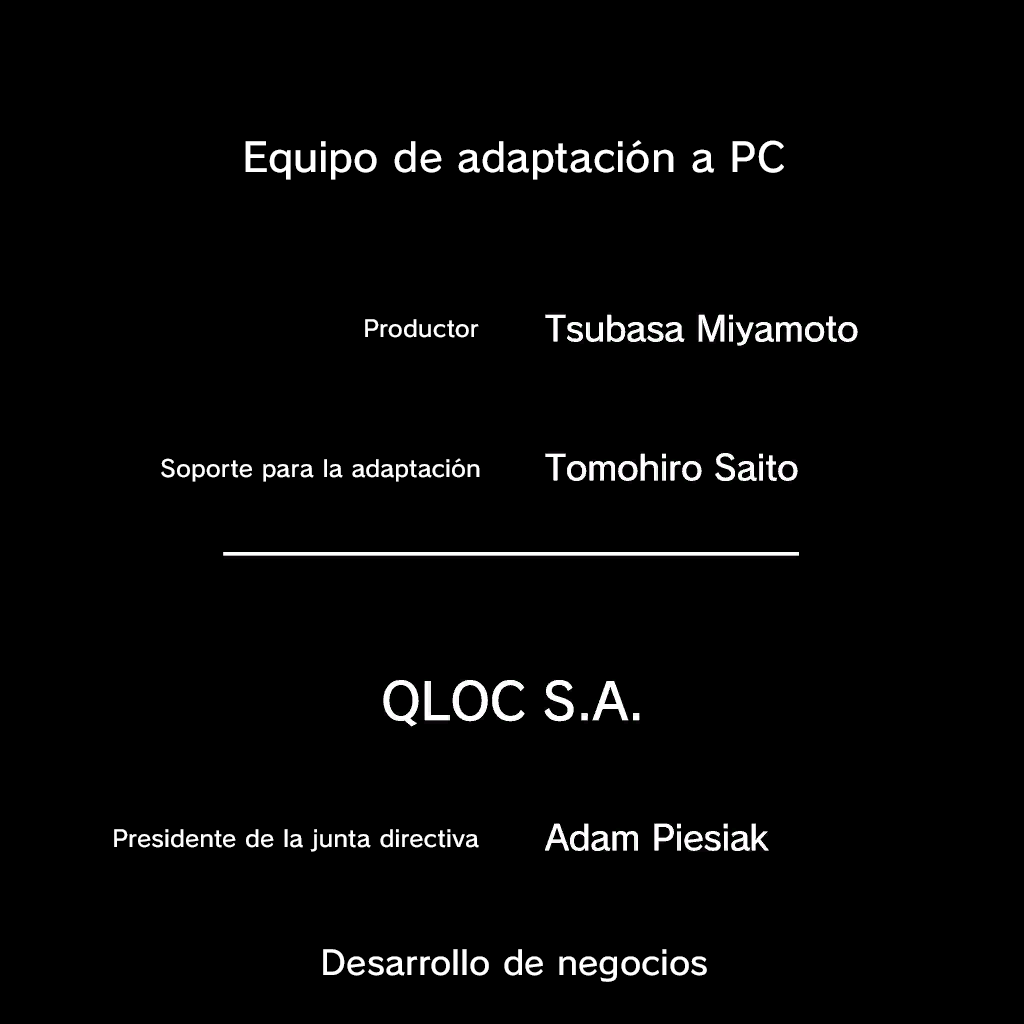
<style>
.page{position:relative;width:1024px;height:1024px;background:#000000}
.page>*{position:absolute;margin:0}
.t1{font:39.3px "SCEPS3RodinLATIN-Regular";letter-spacing:0.015em;color:#ffffff}
.t2{font:22.8px "SCEPS3RodinLATIN-Regular";letter-spacing:0.015em;color:#ffffff}
.t3{font:32.9px "SCEPS3RodinLATIN-Regular";letter-spacing:0.015em;color:#ffffff}
</style>
<div class="page">
<p class="t1" style="left:245px;top:140px;width:539px;height:40px">Equipo de adaptación a PC</p>
<p class="t2" style="left:365px;top:319px;width:114px;height:19px">Productor</p>
<p class="t2" style="left:161px;top:458px;width:319px;height:24px">Soporte para la adaptación</p>
<p class="t2" style="left:114px;top:829px;width:365px;height:23px">Presidente de la junta directiva</p>
<p class="t3" style="left:323px;top:949px;width:384px;height:33px">Desarrollo de negocios</p>
</div>
